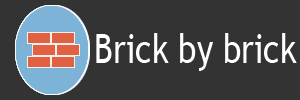
<style>
.page{position:relative;width:300px;height:100px;background:#333333}
.page>*{position:absolute;margin:0}
.t1{font:40px "TrebuchetMS";color:#ffffff;scale:0.83 1}
</style>
<div class="page">
<p class="t1" style="left:96px;top:33px;width:201px;height:38px">Brick by brick</p>
</div>
